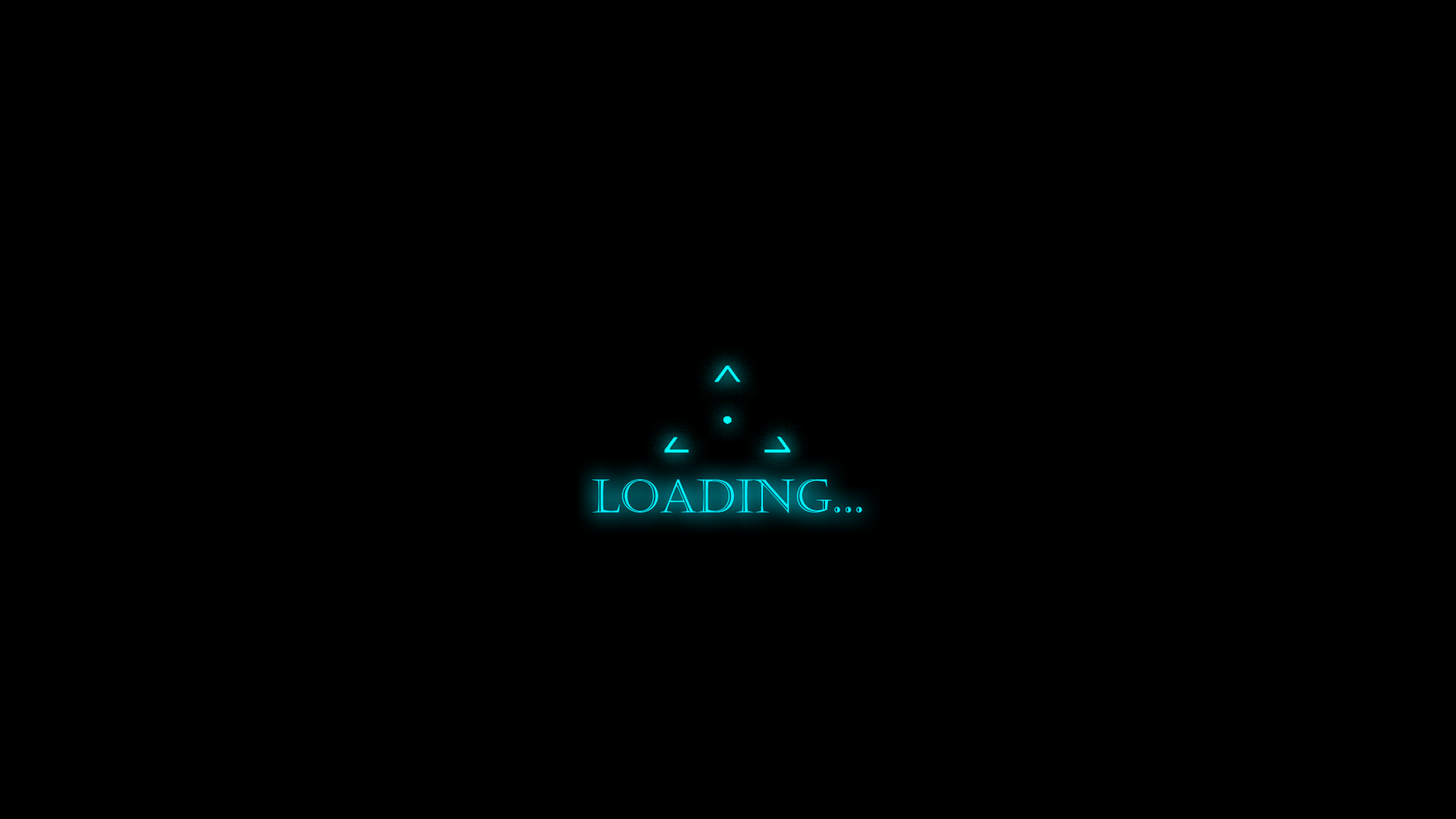
<style>
.page{position:relative;width:1456px;height:819px;background:#000000}
.page>*{position:absolute;margin:0}
.t1{font:45.5px "Castellar";color:#00f0ff}
</style>
<div class="page">
<p class="t1" style="left:592px;top:479px;width:270px;height:34px">Loading...</p>
</div>
